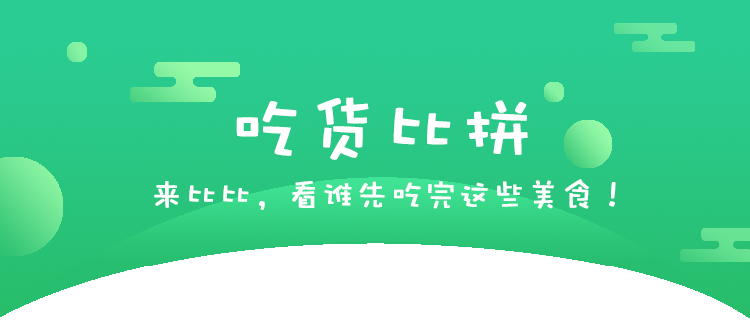
<style>
.page{position:relative;width:750px;height:320px}
.page>*{position:absolute;margin:0}
.t1{font:75px "DFPWaWaW5";color:#ffffff;font-weight:bold}
.t2{font:33.3px "DFPWaWaW5";color:#fefefe;font-weight:bold}
</style>
<div class="page">
<p class="t1" style="left:236px;top:97px;width:292px;height:63px">吃货比拼</p>
<p class="t2" style="left:154px;top:179px;width:462px;height:31px">来比比，看谁先吃完这些美食！</p>
</div>
